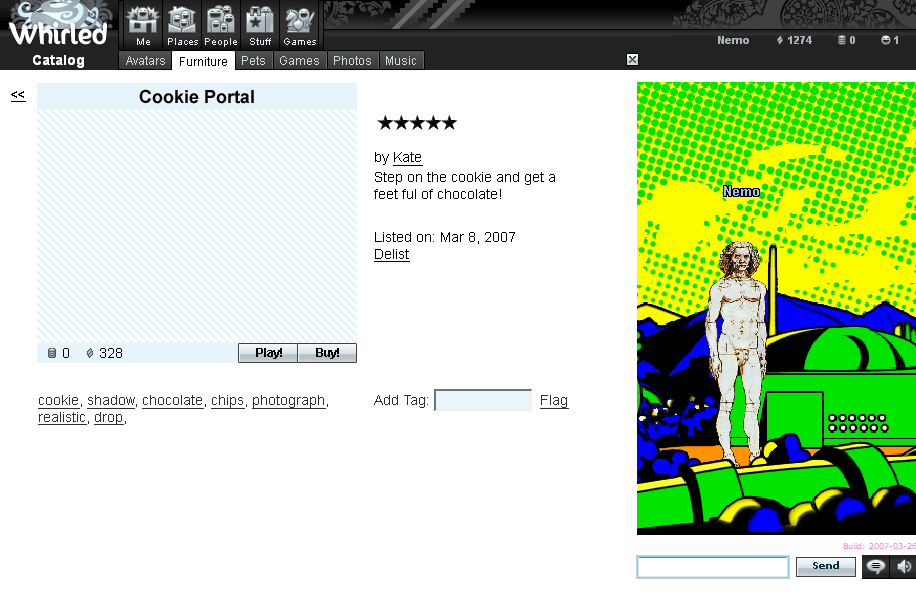
<style>
.page{position:relative;width:916px;height:605px;background:#ffffff}
.page>*{position:absolute;margin:0}
.t1{font:18px "Arial-BoldMT";color:#0f0000}
.t2{font:12px "Arial-BoldMT";color:#000000;text-decoration:underline}
.t3{font:14px "ArialMT";color:#000000;text-decoration:underline}
.t4{font:14px "ArialMT";color:#000000}
.t5{font:12px "Arial-BoldMT";color:#000000}
.t6{font:14px "ArialMT";color:#2d2d2d;text-decoration:underline}
.t7{font:14px "ArialMT";color:#2d2d2d}
</style>
<div class="page">
<p class="t1" style="left:139px;top:89px;width:115px;height:15px">Cookie Portal</p>
<p class="t2" style="left:11px;top:91px;width:15px;height:11px">&lt;&lt;</p>
<p class="t3" style="left:375px;top:152px;width:48px;height:14px"><span class="t4">by </span>Kate</p>
<p class="t4" style="left:374px;top:172px;width:181px;height:27px">Step on the cookie and get a<br>feet ful of chocolate!</p>
<p class="t4" style="left:374px;top:232px;width:141px;height:30px">Listed on: Mar 8, 2007<br><span class="t3">Delist</span></p>
<p class="t5" style="left:256px;top:348px;width:26px;height:11px">Play!</p>
<p class="t5" style="left:316px;top:348px;width:23px;height:11px">Buy!</p>
<p class="t6" style="left:38px;top:395px;width:290px;height:30px">cookie<span class="t7">, </span>shadow<span class="t7">, </span>chocolate<span class="t7">, </span>chips<span class="t7">, </span>photograph<span class="t7">,<br></span>realistic<span class="t7">, </span>drop<span class="t7">,</span></p>
<p class="t7" style="left:374px;top:395px;width:54px;height:13px">Add Tag:</p>
<p class="t6" style="left:540px;top:395px;width:29px;height:14px">Flag</p>
</div>
